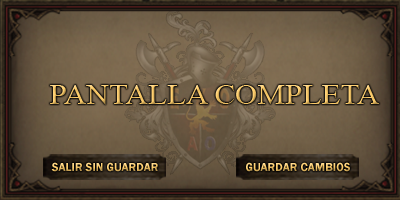
<style>
.page{position:relative;width:400px;height:200px}
.page>*{position:absolute;margin:0}
.t1{font:28.2px "TimesNewRomanPSMT";scale:1.1 1}
.t2{font:12px "FranklinGothic-Demi"}
</style>
<div class="page">
<p class="t1" style="left:50px;top:85px;width:329px;height:20px">PANTALLA COMPLETA</p>
<p class="t2" style="left:51px;top:162px;width:107px;height:10px">SALIR SIN GUARDAR</p>
<p class="t2" style="left:246px;top:162px;width:104px;height:10px">GUARDAR CAMBIOS</p>
</div>
